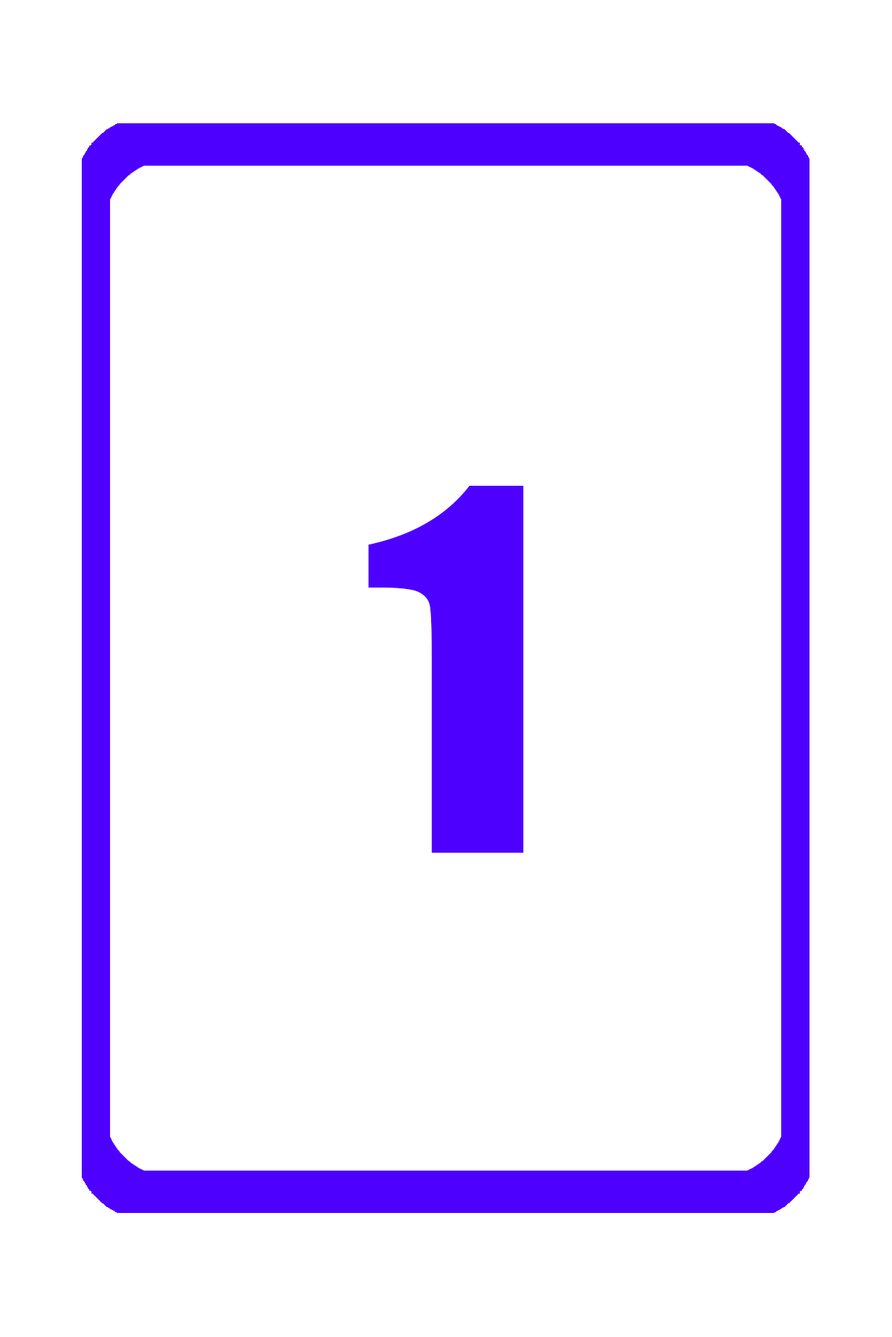
<style>
.page{position:relative;width:892px;height:1337px;background:#ffffff}
.page>*{position:absolute;margin:0}
.t1{font:464.4px "Impact";color:#4e00ff}
</style>
<div class="page">
<p class="t1" style="left:368px;top:486px;width:156px;height:367px">1</p>
</div>
